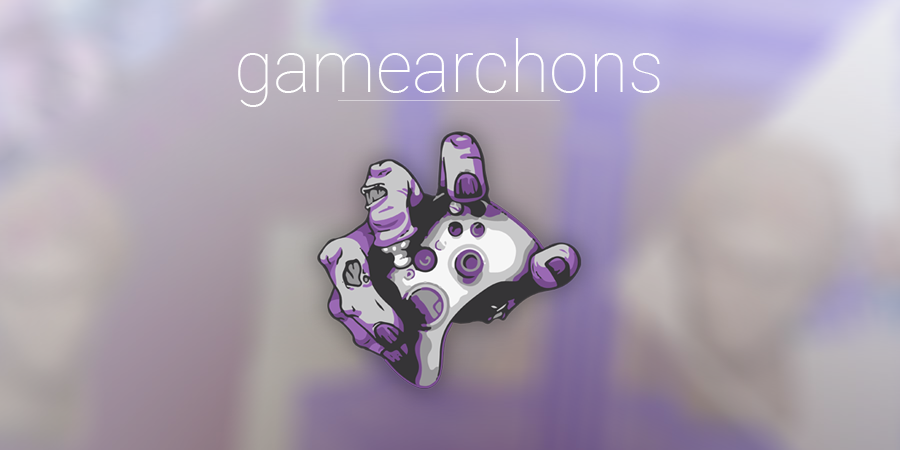
<style>
.page{position:relative;width:900px;height:450px}
.page>*{position:absolute;margin:0}
.t1{font:72px "Roboto-Thin";color:#ffffff}
</style>
<div class="page">
<p class="t1" style="left:238px;top:38px;width:422px;height:69px">gamearchons</p>
</div>
